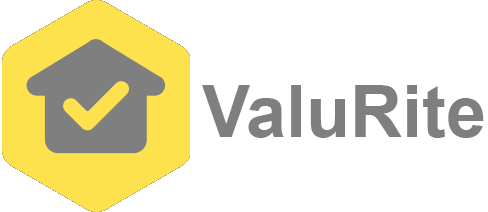
<style>
.page{position:relative;width:488px;height:212px;background:#ffffff}
.page>*{position:absolute;margin:0}
.t1{font:72px "Arial-BoldMT";color:#7f7f7f}
</style>
<div class="page">
<p class="t1" style="left:202px;top:85px;width:282px;height:53px">ValuRite</p>
</div>
